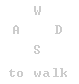
<style>
.page{position:relative;width:79px;height:84px;background:#ffffff}
.page>*{position:absolute;margin:0}
.t1{font:13px "Terminal";letter-spacing:0.04em;color:#cccccc}
</style>
<div class="page">
<p class="t1" style="left:34px;top:6px;width:7px;height:9px">W</p>
<p class="t1" style="left:13px;top:25px;width:6px;height:9px">A</p>
<p class="t1" style="left:55px;top:25px;width:7px;height:9px">D</p>
<p class="t1" style="left:34px;top:45px;width:6px;height:9px">S</p>
<p class="t1" style="left:9px;top:68px;width:58px;height:9px">to walk</p>
</div>
